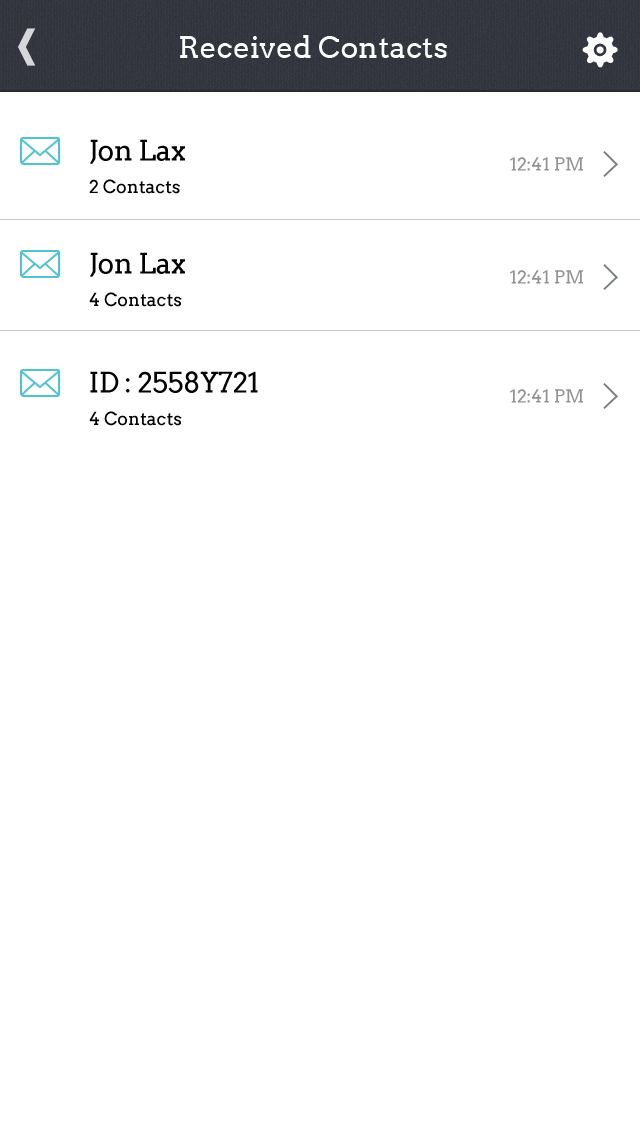
<style>
.page{position:relative;width:640px;height:1136px;background:#ffffff}
.page>*{position:absolute;margin:0}
.t1{font:30px "Arvo";color:#ffffff}
.t2{font:28px "Arvo";letter-spacing:-0.01em;color:#000000}
.t3{font:18px "Arvo";color:#929292}
.t4{font:18px "Arvo";color:#000000}
</style>
<div class="page">
<p class="t1" style="left:180px;top:35px;width:267px;height:23px">Received Contacts</p>
<p class="t2" style="left:90px;top:139px;width:95px;height:25px">Jon Lax</p>
<p class="t3" style="left:510px;top:157px;width:73px;height:14px">12:41 PM</p>
<p class="t4" style="left:89px;top:179px;width:91px;height:15px">2 Contacts</p>
<p class="t2" style="left:90px;top:252px;width:95px;height:25px">Jon Lax</p>
<p class="t3" style="left:510px;top:270px;width:73px;height:14px">12:41 PM</p>
<p class="t4" style="left:89px;top:292px;width:93px;height:15px">4 Contacts</p>
<p class="t2" style="left:90px;top:371px;width:168px;height:22px">ID : 2558Y721</p>
<p class="t3" style="left:510px;top:389px;width:73px;height:14px">12:41 PM</p>
<p class="t4" style="left:89px;top:411px;width:93px;height:15px">4 Contacts</p>
</div>
